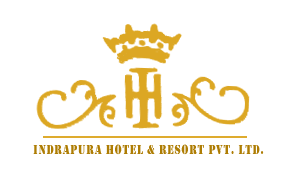
<style>
.page{position:relative;width:290px;height:179px;background:#ffffff}
.page>*{position:absolute;margin:0}
.t1{font:13.7px "Stencil";letter-spacing:0.075em;color:#ae7d04;scale:0.79 1}
</style>
<div class="page">
<p class="t1" style="left:33px;top:144px;width:231px;height:11px">INDRAPURA HOTEL &amp; RESORT PVT. LTD.</p>
</div>
